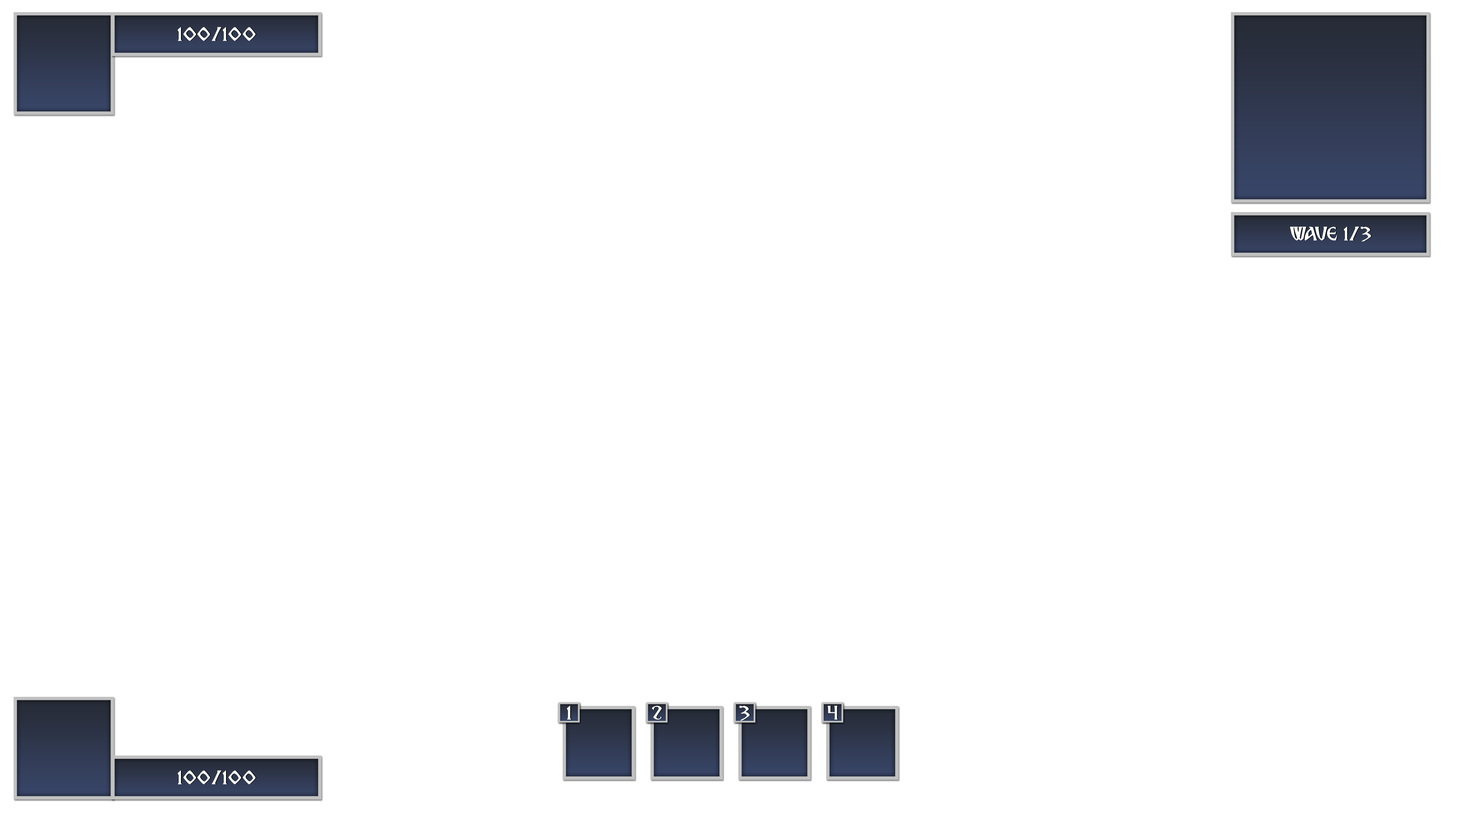
<style>
.page{position:relative;width:1457px;height:818px;background:#ffffff}
.page>*{position:absolute;margin:0}
.t1{font:19.7px "BreatheFire";letter-spacing:0.025em;color:#ffffff}
</style>
<div class="page">
<p class="t1" style="left:178px;top:27px;width:78px;height:14px">100/100</p>
<p class="t1" style="left:1290px;top:227px;width:82px;height:15px">WAVE 1/3</p>
<p class="t1" style="left:567px;top:706px;width:4px;height:14px">1</p>
<p class="t1" style="left:652px;top:706px;width:10px;height:14px">2</p>
<p class="t1" style="left:740px;top:706px;width:10px;height:15px">3</p>
<p class="t1" style="left:828px;top:706px;width:10px;height:14px">4</p>
<p class="t1" style="left:178px;top:770px;width:78px;height:14px">100/100</p>
</div>
